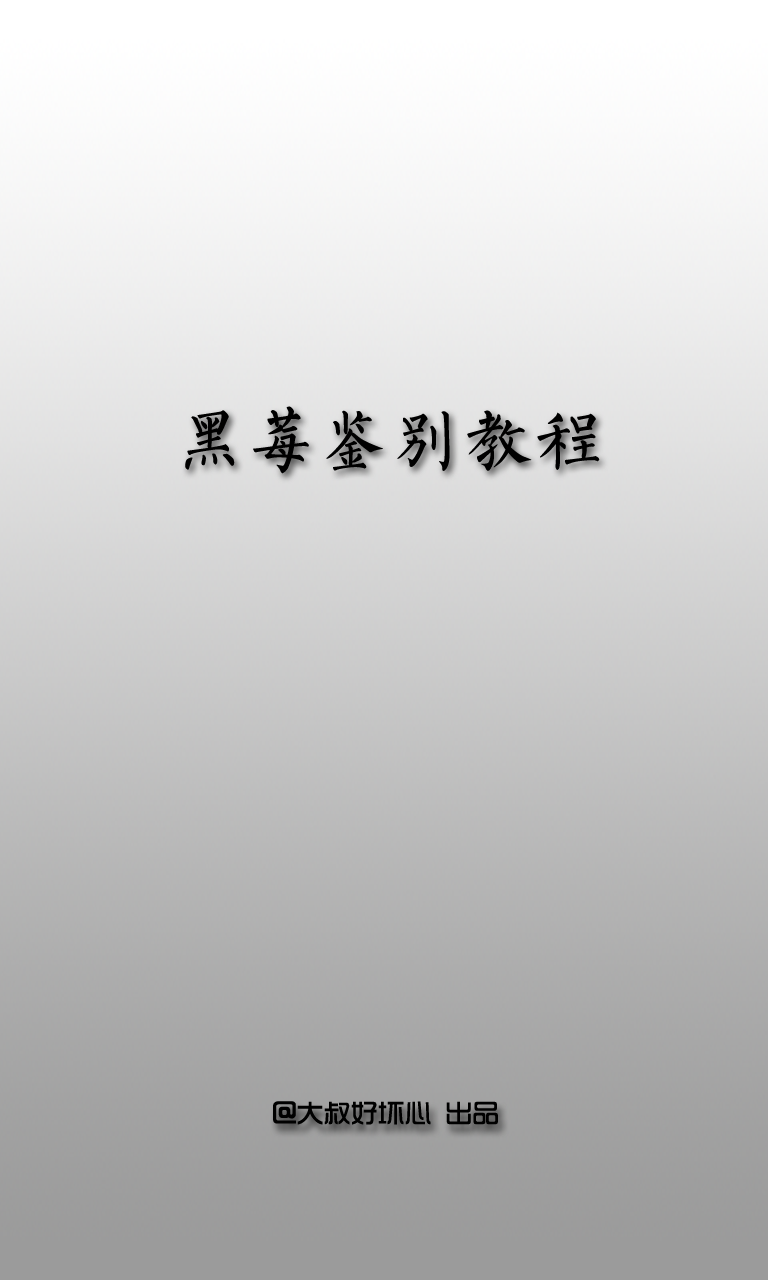
<style>
.page{position:relative;width:768px;height:1280px}
.page>*{position:absolute;margin:0}
.t1{font:72px "Untitled";color:#000000}
.t2{font:27px "TRENDS";color:#000000}
</style>
<div class="page">
<p class="t1" style="left:185px;top:406px;width:415px;height:68px">黑莓鉴别教程</p>
<p class="t2" style="left:273px;top:1101px;width:225px;height:24px">@大叔好坏心 出品</p>
</div>
